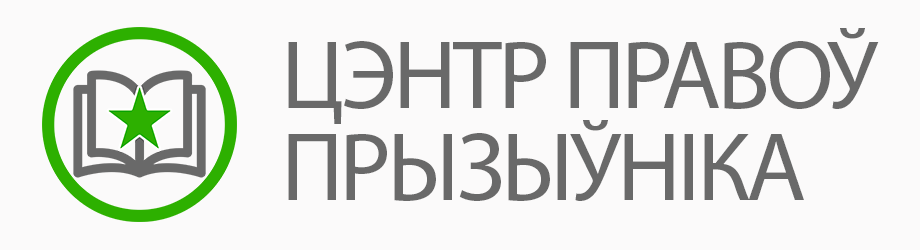
<style>
.page{position:relative;width:920px;height:250px;background:#fbfafa}
.page>*{position:absolute;margin:0}
.t1{font:98px/92px "MyriadPro-Regular";letter-spacing:-0.04em;color:#696969}
</style>
<div class="page">
<p class="t1" style="left:288px;top:28px;width:591px;height:173px">ЦЭНТР ПРАВОЎ<br>ПРЫЗЫЎНІКА</p>
</div>
